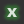
<style>
.page{position:relative;width:24px;height:24px;background:#333333}
.page>*{position:absolute;margin:0}
.t1{font:18px "SegoeUI-Bold";color:#d9e5d9}
</style>
<div class="page">
<p class="t1" style="left:7px;top:8px;width:10px;height:9px">x</p>
</div>
